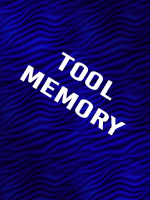
<style>
.page{position:relative;width:150px;height:200px}
.page>*{position:absolute;margin:0}
.t1{font:24px "BebasKai";color:#fcfcfc;scale:1.75 1}
</style>
<div class="page">
<p class="t1" style="left:20px;top:52px;width:106px;height:84px;text-align:center;rotate:31deg">Tool<br>MEMORY</p>
</div>
